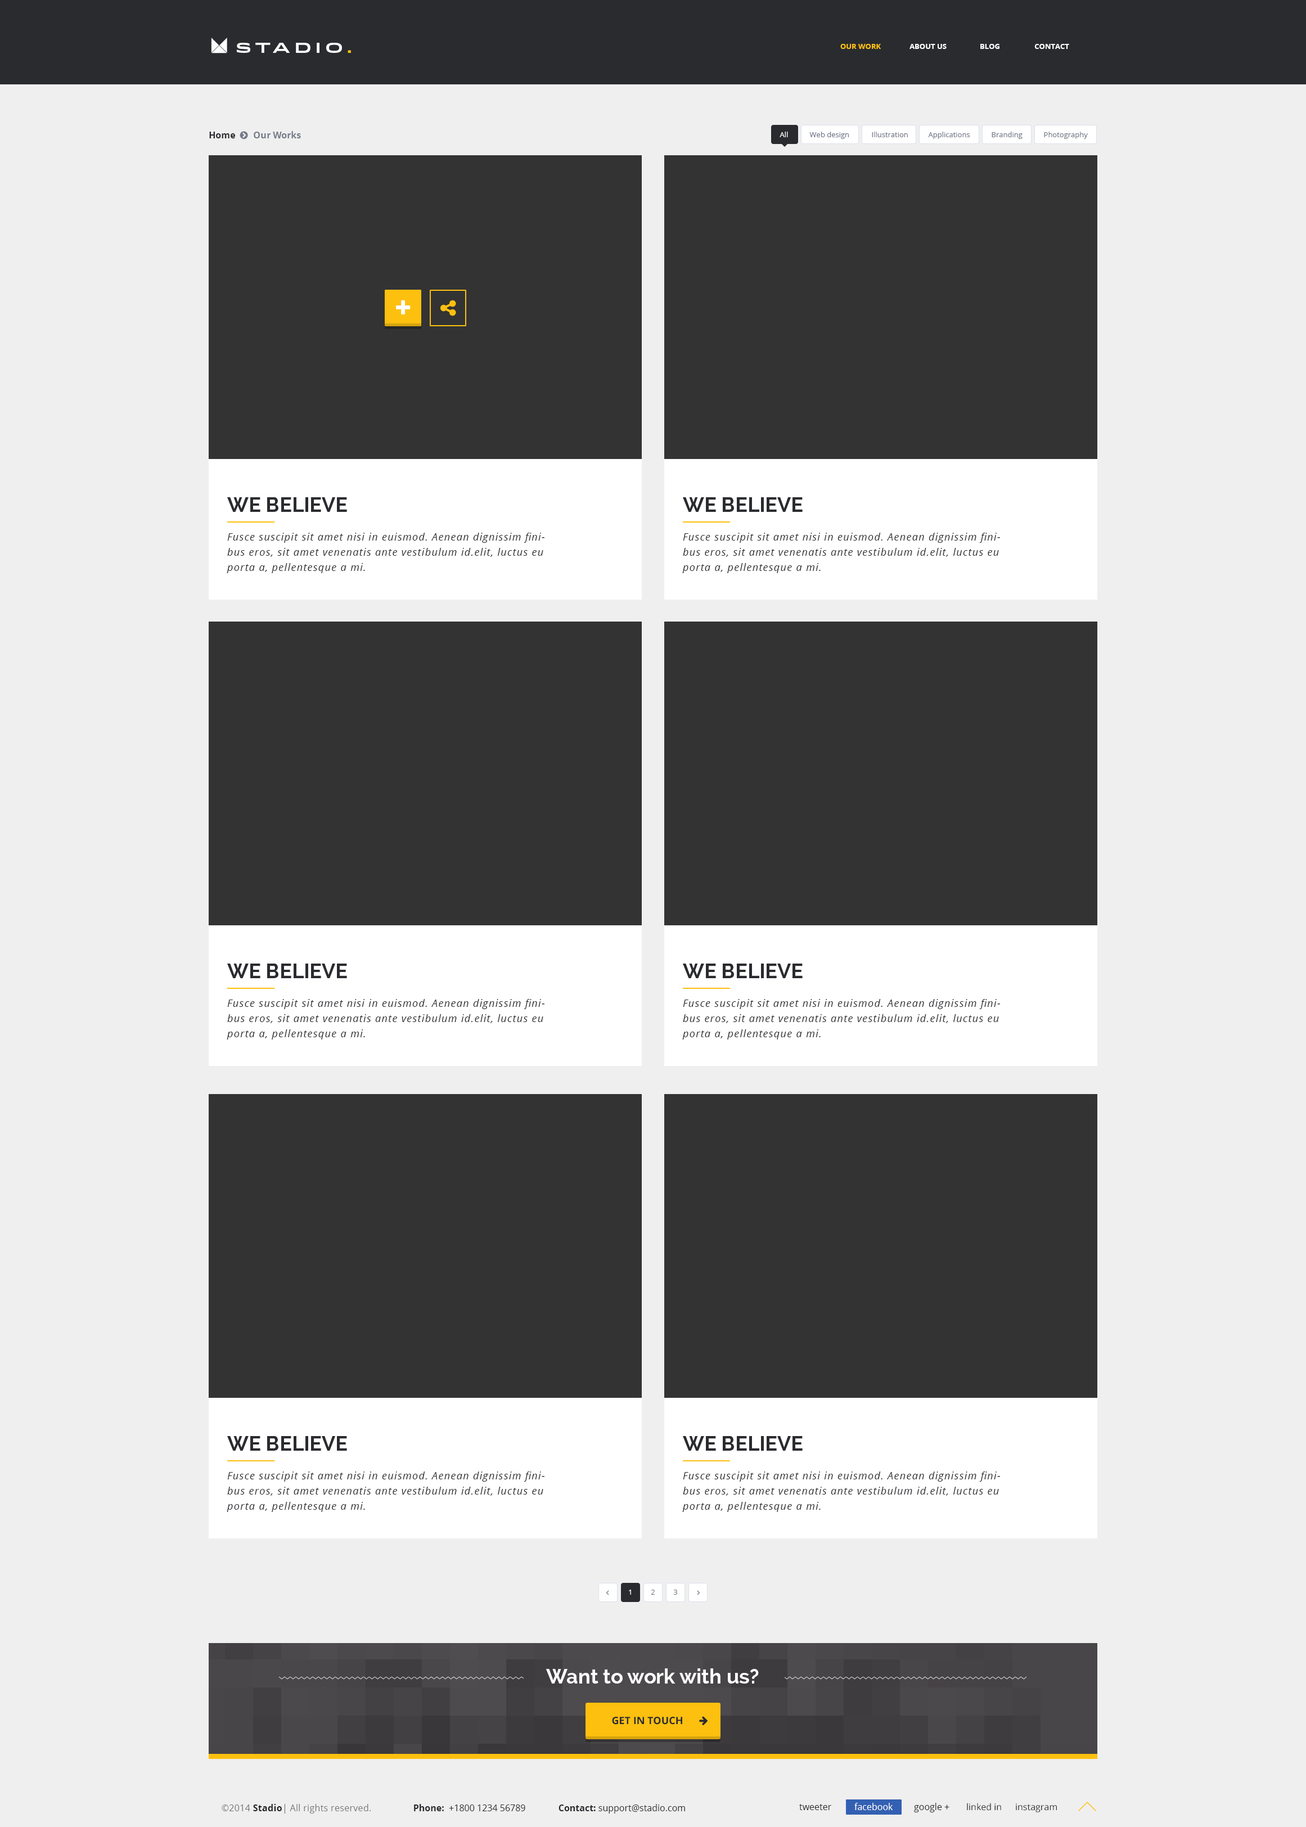
<style>
.page{position:relative;width:1306px;height:1827px;background:#efefef}
.page>*{position:absolute;margin:0}
.t1{font:13.5px "Idlewild-Bold";letter-spacing:0.3em;color:#ffffff;text-transform:uppercase}
.t2{font:13.5px "Idlewild-Bold";letter-spacing:0.3em;color:#fdc00f;text-transform:uppercase}
.t3{font:7.3px "OpenSans-Bold";color:#fdc00f;text-transform:uppercase}
.t4{font:7.3px "OpenSans-Bold";color:#ffffff;text-transform:uppercase}
.t5{font:9px "OpenSans-Bold";color:#757989}
.t6{font:9px "OpenSans-Bold";color:#2a2b2f}
.t7{font:7.3px "OpenSans";color:#ffffff}
.t8{font:7.3px "OpenSans";color:#757989}
.t9{font:20.2px "Raleway-Bold";color:#2a2b2f}
.t10{font:10.1px/15.2px "OpenSans-Italic";letter-spacing:0.075em;color:#2a2b2f}
.t11{font:20.2px "Raleway-Bold";color:#ffffff}
.t12{font:10.1px "OpenSans-Bold";color:#2a2b2f;text-transform:uppercase}
.t13{font:9px "OpenSans";letter-spacing:0.02em;color:#787878}
.t14{font:9px "OpenSans-Bold";letter-spacing:0.02em;color:#222222}
.t15{font:9px "OpenSans";color:#2a2b2f}
.t16{font:9px "OpenSans";color:#ffffff}
</style>
<div class="page">
<p class="t1" style="left:237px;top:43px;width:114px;height:10px">stAdio<span class="t2">.</span></p>
<p class="t3" style="left:840px;top:44px;width:41px;height:5px">our work</p>
<p class="t4" style="left:910px;top:44px;width:37px;height:5px">About us</p>
<p class="t4" style="left:980px;top:44px;width:20px;height:5px">BLOG</p>
<p class="t4" style="left:1034px;top:44px;width:35px;height:5px">Contact</p>
<p class="t5" style="left:209px;top:131px;width:92px;height:7px"><span class="t6">Home        </span>Our Works</p>
<p class="t7" style="left:780px;top:132px;width:8px;height:5px">All</p>
<p class="t8" style="left:809px;top:132px;width:40px;height:7px">Web design</p>
<p class="t8" style="left:872px;top:132px;width:36px;height:5px">Illustration</p>
<p class="t8" style="left:928px;top:132px;width:42px;height:7px">Applications</p>
<p class="t8" style="left:992px;top:132px;width:31px;height:7px">Branding</p>
<p class="t8" style="left:1044px;top:132px;width:44px;height:7px">Photography</p>
<p class="t9" style="left:227px;top:497px;width:120px;height:15px">WE BELIEVE</p>
<p class="t9" style="left:683px;top:497px;width:120px;height:15px">WE BELIEVE</p>
<p class="t10" style="left:227px;top:533px;width:317px;height:40px">Fusce suscipit sit amet nisi in euismod. Aenean dignissim finibus eros, sit amet venenatis ante vestibulum id.elit, luctus eu porta a, pellentesque a mi.</p>
<p class="t10" style="left:682px;top:533px;width:318px;height:40px">Fusce suscipit sit amet nisi in euismod. Aenean dignissim finibus eros, sit amet venenatis ante vestibulum id.elit, luctus eu porta a, pellentesque a mi.</p>
<p class="t9" style="left:227px;top:964px;width:120px;height:14px">WE BELIEVE</p>
<p class="t9" style="left:683px;top:964px;width:120px;height:14px">WE BELIEVE</p>
<p class="t10" style="left:227px;top:999px;width:317px;height:40px">Fusce suscipit sit amet nisi in euismod. Aenean dignissim finibus eros, sit amet venenatis ante vestibulum id.elit, luctus eu porta a, pellentesque a mi.</p>
<p class="t10" style="left:682px;top:999px;width:318px;height:40px">Fusce suscipit sit amet nisi in euismod. Aenean dignissim finibus eros, sit amet venenatis ante vestibulum id.elit, luctus eu porta a, pellentesque a mi.</p>
<p class="t9" style="left:227px;top:1436px;width:120px;height:15px">WE BELIEVE</p>
<p class="t9" style="left:683px;top:1436px;width:120px;height:15px">WE BELIEVE</p>
<p class="t10" style="left:227px;top:1471px;width:317px;height:41px">Fusce suscipit sit amet nisi in euismod. Aenean dignissim finibus eros, sit amet venenatis ante vestibulum id.elit, luctus eu porta a, pellentesque a mi.</p>
<p class="t10" style="left:682px;top:1471px;width:318px;height:41px">Fusce suscipit sit amet nisi in euismod. Aenean dignissim finibus eros, sit amet venenatis ante vestibulum id.elit, luctus eu porta a, pellentesque a mi.</p>
<p class="t7" style="left:629px;top:1590px;width:2px;height:5px">1</p>
<p class="t8" style="left:651px;top:1590px;width:4px;height:5px">2</p>
<p class="t8" style="left:673px;top:1590px;width:4px;height:5px">3</p>
<p class="t11" style="left:546px;top:1668px;width:213px;height:16px">Want to work with us?</p>
<p class="t12" style="left:612px;top:1717px;width:70px;height:8px">GET IN TOUCH</p>
<p class="t13" style="left:222px;top:1804px;width:149px;height:9px">©2014 <span class="t14">Stadio</span>| All rights reserved.</p>
<p class="t15" style="left:414px;top:1804px;width:271px;height:9px"><span class="t6">Phone:</span>  +1800 1234 56789              <span class="t6">Contact:</span> support@stadio.com</p>
<p class="t15" style="left:799px;top:1804px;width:32px;height:6px">tweeter</p>
<p class="t16" style="left:854px;top:1803px;width:39px;height:7px">facebook</p>
<p class="t15" style="left:914px;top:1803px;width:35px;height:9px">google +</p>
<p class="t15" style="left:967px;top:1803px;width:34px;height:8px">linked in</p>
<p class="t15" style="left:1016px;top:1803px;width:41px;height:9px">instagram</p>
</div>
